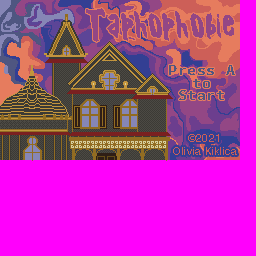
<style>
.page{position:relative;width:256px;height:256px;background:#ff00fc}
.page>*{position:absolute;margin:0}
.t1{font:36.2px "XGhostXRegular";letter-spacing:0.04em;color:#934785}
.t2{font:14.6px/12.5px "SourceCodePro-Bold";letter-spacing:0.04em;color:#4f5681}
.t3{font:10.4px/12.5px "Helvetica";letter-spacing:0.04em;color:#cd5f58}
.t4{font:10.4px/12.5px "Helvetica";letter-spacing:0.005em;color:#cd5f58}
</style>
<div class="page">
<p class="t1" style="left:86px;top:8px;width:148px;height:34px">Taphophobie</p>
<p class="t2" style="left:169px;top:65px;width:66px;height:35px;text-align:center">Press A<br>to<br>Start</p>
<p class="t3" style="left:173px;top:134px;width:64px;height:21px;text-align:center">©2021<br>Ol<span class="t4">ivi</span>a Kiklica</p>
</div>
